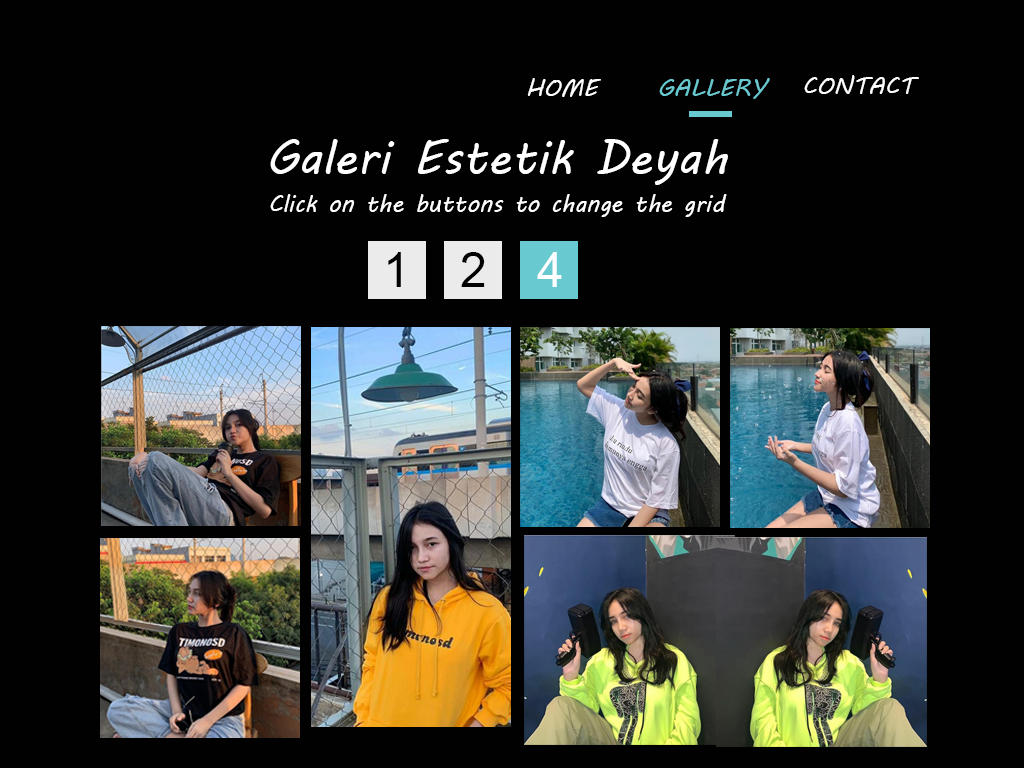
<style>
.page{position:relative;width:1024px;height:768px;background:#010101}
.page>*{position:absolute;margin:0}
.t1{font:24px "MVBoli";color:#ffffff}
.t2{font:24px "MVBoli";color:#69c9d0}
.t3{font:48px "MVBoli";color:#ffffff}
.t4{font:48px "ArialMT";color:#010101}
.t5{font:48px "ArialMT";color:#ffffff}
</style>
<div class="page">
<p class="t1" style="left:527px;top:78px;width:74px;height:19px">HOME</p>
<p class="t2" style="left:659px;top:78px;width:111px;height:21px">GALLERY</p>
<p class="t1" style="left:804px;top:75px;width:115px;height:19px">CONTACT</p>
<p class="t3" style="left:270px;top:139px;width:458px;height:46px">Galeri Estetik Deyah</p>
<p class="t1" style="left:270px;top:194px;width:457px;height:23px">Click on the buttons to change the grid view.</p>
<p class="t4" style="left:388px;top:252px;width:13px;height:35px">1</p>
<p class="t4" style="left:461px;top:252px;width:24px;height:35px">2</p>
<p class="t5" style="left:537px;top:252px;width:25px;height:35px">4</p>
</div>
